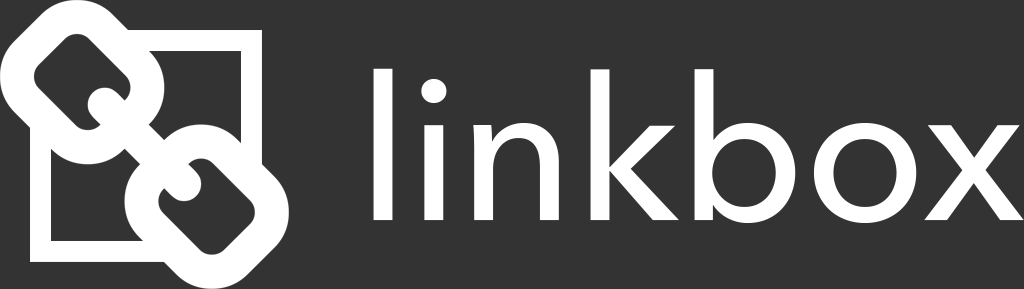
<style>
.page{position:relative;width:1024px;height:289px;background:#333333}
.page>*{position:absolute;margin:0}
.t1{font:200px "AvenirNext-Medium";letter-spacing:-0.005em;color:#ffffff}
</style>
<div class="page">
<p class="t1" style="left:373px;top:68px;width:651px;height:155px">linkbox</p>
</div>
